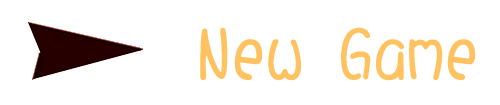
<style>
.page{position:relative;width:500px;height:105px;background:#ffffff}
.page>*{position:absolute;margin:0}
.t1{font:70.8px "DFShaoNvW5-A";color:#ffc261}
</style>
<div class="page">
<p class="t1" style="left:200px;top:27px;width:276px;height:54px">New Game</p>
</div>
